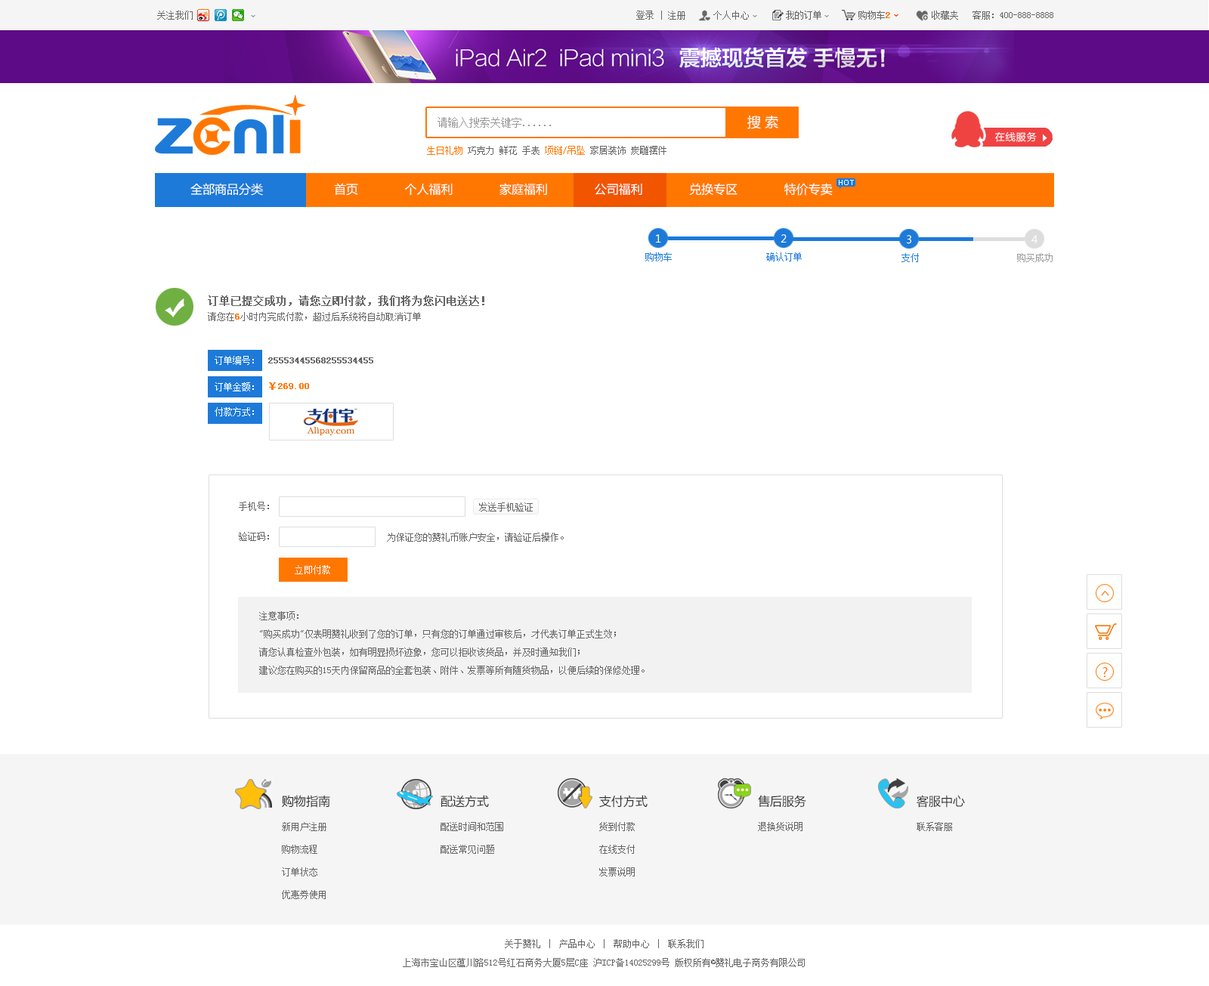
<style>
.page{position:relative;width:1209px;height:986px;background:#ffffff}
.page>*{position:absolute;margin:0}
.t1{font:9.1px "SimSun";color:#666666}
.t2{font:9.1px "SimSun";color:#ff7700;font-weight:bold}
.t3{font:10.6px "SimSun";color:#999999}
.t4{font:13.6px "MicrosoftYaHei";color:#ffffff}
.t5{font:9.1px "SimSun";color:#ff7700}
.t6{font:12.1px "MicrosoftYaHei";color:#ffffff}
.t7{font:7.6px "ArialMT";color:#ffffff}
.t8{font:10.6px "MicrosoftYaHei";color:#ffffff}
.t9{font:9.1px "SimSun";color:#1d7ad9}
.t10{font:9.1px "SimSun";color:#999999}
.t11{font:10.6px "SimSun";color:#666666;font-weight:bold}
.t12{font:9.1px "SimSun";color:#ffffff}
.t13{font:9.1px "SimSun";color:#666666;font-weight:bold}
.t14{font:15.9px "MicrosoftYaHei";color:#ff7700;scale:0.64 1}
.t15{font:9.1px/18.1px "SimSun";color:#666666}
.t16{font:12.8px "MicrosoftYaHei";color:#ff7700}
.t17{font:12.1px "MicrosoftYaHei";color:#333333}
.t18{font:9.1px/22.7px "SimSun";color:#666666}
.t19{font:9.1px/18.9px "SimSun";color:#666666}
</style>
<div class="page">
<p class="t1" style="left:157px;top:11px;width:36px;height:9px">关注我们</p>
<p class="t1" style="left:636px;top:11px;width:417px;height:9px">登录 | 注册      个人中心        我的订单        购物车<span class="t2">2</span>         收藏夹   客服：400-888-8888</p>
<p class="t3" style="left:438px;top:117px;width:113px;height:11px">请输入搜索关键字......</p>
<p class="t4" style="left:747px;top:116px;width:31px;height:13px">搜 索</p>
<p class="t1" style="left:427px;top:146px;width:240px;height:9px"><span class="t5">生日礼物</span> 巧克力 鲜花 手表 <span class="t5">项链/吊坠</span> 家居装饰 炭雕摆件</p>
<p class="t6" style="left:190px;top:183px;width:73px;height:13px">全部商品分类</p>
<p class="t6" style="left:334px;top:183px;width:499px;height:13px">首页             个人福利             家庭福利             公司福利             兑换专区             特价专卖</p>
<p class="t7" style="left:839px;top:180px;width:15px;height:5px">HOT</p>
<p class="t8" style="left:656px;top:234px;width:5px;height:9px">1</p>
<p class="t8" style="left:781px;top:234px;width:6px;height:9px">2</p>
<p class="t8" style="left:907px;top:235px;width:4px;height:9px">3</p>
<p class="t8" style="left:1032px;top:235px;width:6px;height:8px">4</p>
<p class="t9" style="left:645px;top:252px;width:27px;height:9px">购物车</p>
<p class="t9" style="left:766px;top:252px;width:36px;height:9px">确认订单</p>
<p class="t9" style="left:902px;top:253px;width:17px;height:9px">支付</p>
<p class="t10" style="left:1017px;top:253px;width:36px;height:9px">购买成功</p>
<p class="t11" style="left:208px;top:295px;width:276px;height:11px">订单已提交成功，请您立即付款，我们将为您闪电送达！</p>
<p class="t1" style="left:208px;top:312px;width:213px;height:9px">请您在<span class="t2">6</span>小时内完成付款，超过后系统将自动取消订单</p>
<p class="t12" style="left:215px;top:356px;width:39px;height:9px">订单编号：</p>
<p class="t13" style="left:268px;top:357px;width:105px;height:6px">25553445568255534455</p>
<p class="t12" style="left:215px;top:382px;width:39px;height:9px">订单金额：</p>
<p class="t2" style="left:269px;top:382px;width:40px;height:8px">￥269.00</p>
<p class="t12" style="left:215px;top:407px;width:39px;height:9px">付款方式：</p>
<p class="t1" style="left:239px;top:502px;width:30px;height:9px">手机号：</p>
<p class="t1" style="left:479px;top:503px;width:54px;height:9px">发送手机验证</p>
<p class="t1" style="left:239px;top:532px;width:30px;height:9px">验证码：</p>
<p class="t1" style="left:387px;top:533px;width:177px;height:9px">为保证您的赞礼币账户安全，请验证后操作。</p>
<p class="t12" style="left:295px;top:565px;width:35px;height:9px">立即付款</p>
<p class="t14" style="left:1101px;top:591px;width:8px;height:5px;rotate:90deg">&lt;</p>
<p class="t15" style="left:259px;top:611px;width:386px;height:64px">注意事项：<br>"购买成功"仅表明赞礼收到了您的订单，只有您的订单通过审核后，才代表订单正式生效；<br>请您认真检查外包装，如有明显损坏迹象，您可以拒收该货品，并及时通知我们；<br>建议您在购买的15天内保留商品的全套包装、附件、发票等所有随货物品，以便后续的保修处理。</p>
<p class="t16" style="left:1103px;top:667px;width:5px;height:11px">?</p>
<p class="t17" style="left:282px;top:795px;width:48px;height:13px">购物指南</p>
<p class="t17" style="left:441px;top:795px;width:48px;height:13px">配送方式</p>
<p class="t17" style="left:599px;top:795px;width:49px;height:13px">支付方式</p>
<p class="t17" style="left:758px;top:795px;width:48px;height:13px">售后服务</p>
<p class="t17" style="left:917px;top:795px;width:48px;height:13px">客服中心</p>
<p class="t18" style="left:282px;top:822px;width:44px;height:77px">新用户注册<br>购物流程<br>订单状态<br>优惠券使用</p>
<p class="t18" style="left:441px;top:822px;width:62px;height:32px">配送时间和范围<br>配送常见问题</p>
<p class="t18" style="left:599px;top:822px;width:36px;height:55px">货到付款<br>在线支付<br>发票说明</p>
<p class="t1" style="left:758px;top:822px;width:45px;height:9px">退换货说明</p>
<p class="t1" style="left:917px;top:822px;width:35px;height:9px">联系客服</p>
<p class="t19" style="left:403px;top:939px;width:402px;height:28px;text-align:center">关于赞礼 │ 产品中心 │ 帮助中心 │ 联系我们<br>上海市宝山区蕴川路512号红石商务大厦5层C座 沪ICP备14025299号 版权所有©赞礼电子商务有限公司</p>
</div>
